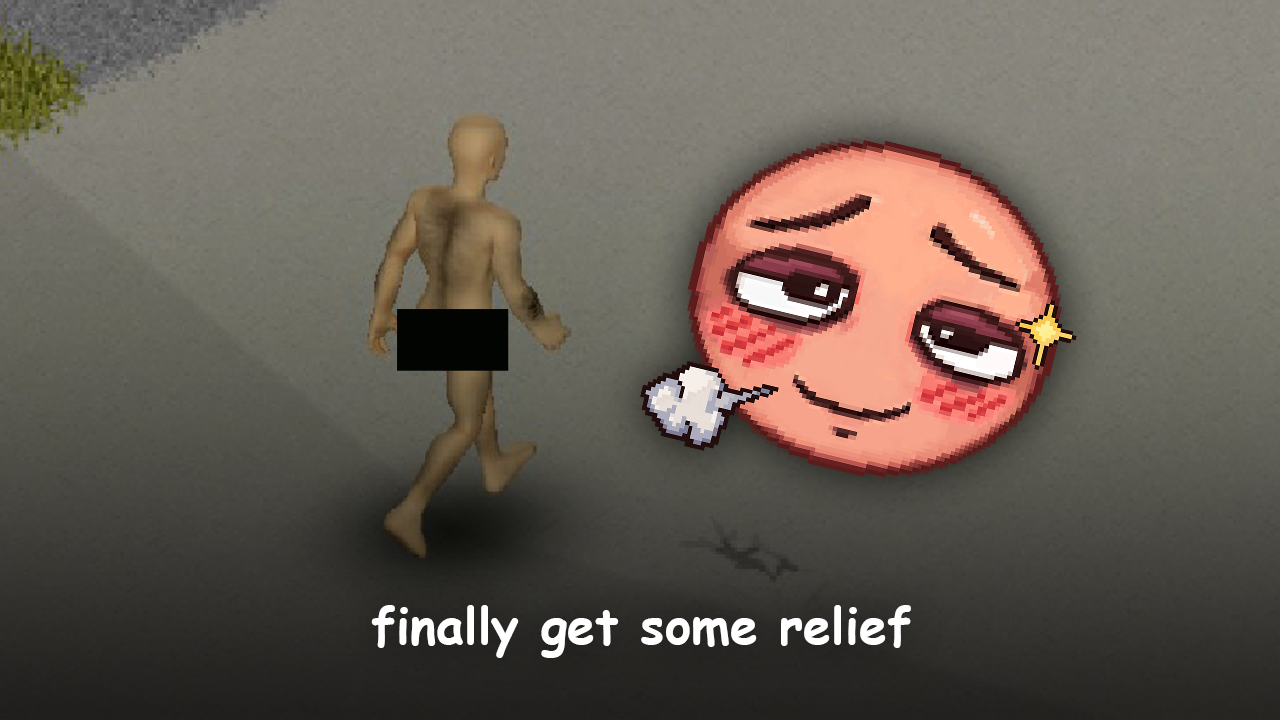
<style>
.page{position:relative;width:1280px;height:720px}
.page>*{position:absolute;margin:0}
.t1{font:50px "ComicSansMS-Bold";color:#ffffff}
</style>
<div class="page">
<p class="t1" style="left:371px;top:605px;width:540px;height:53px">finally get some relief</p>
</div>
